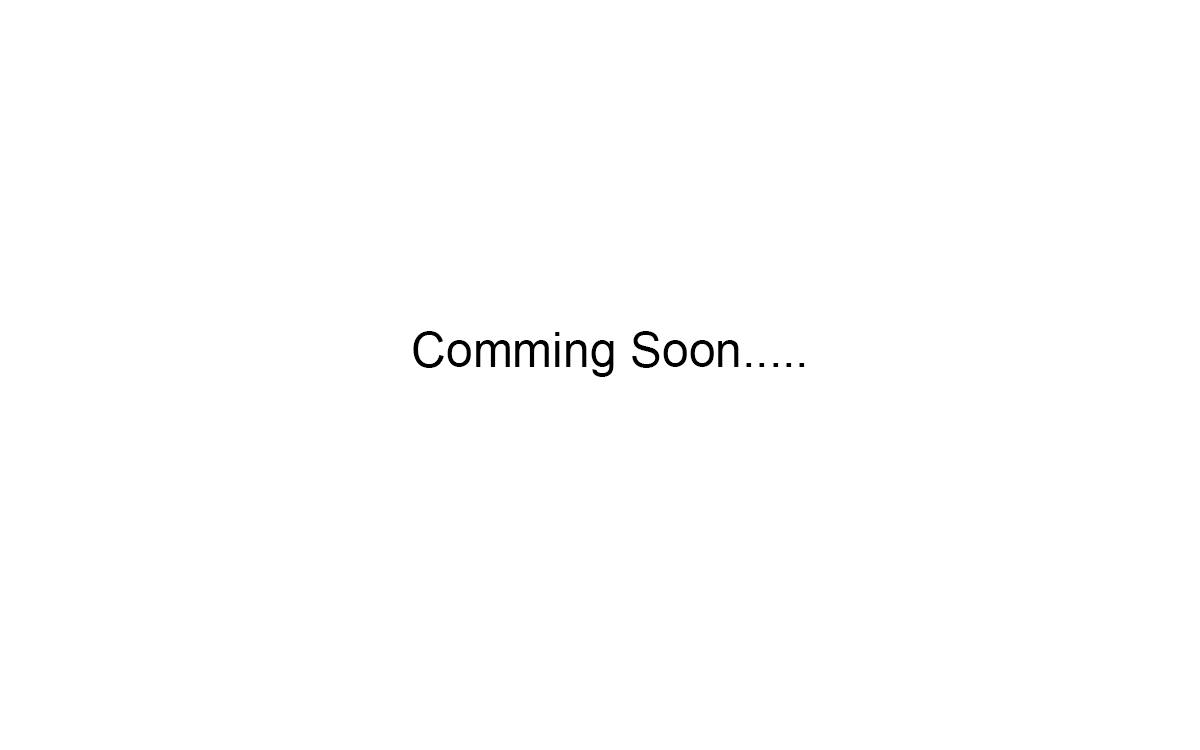
<style>
.page{position:relative;width:1200px;height:750px;background:#ffffff}
.page>*{position:absolute;margin:0}
.t1{font:48px "ArialMT";color:#000000}
</style>
<div class="page">
<p class="t1" style="left:413px;top:331px;width:392px;height:46px">Comming Soon.....</p>
</div>
